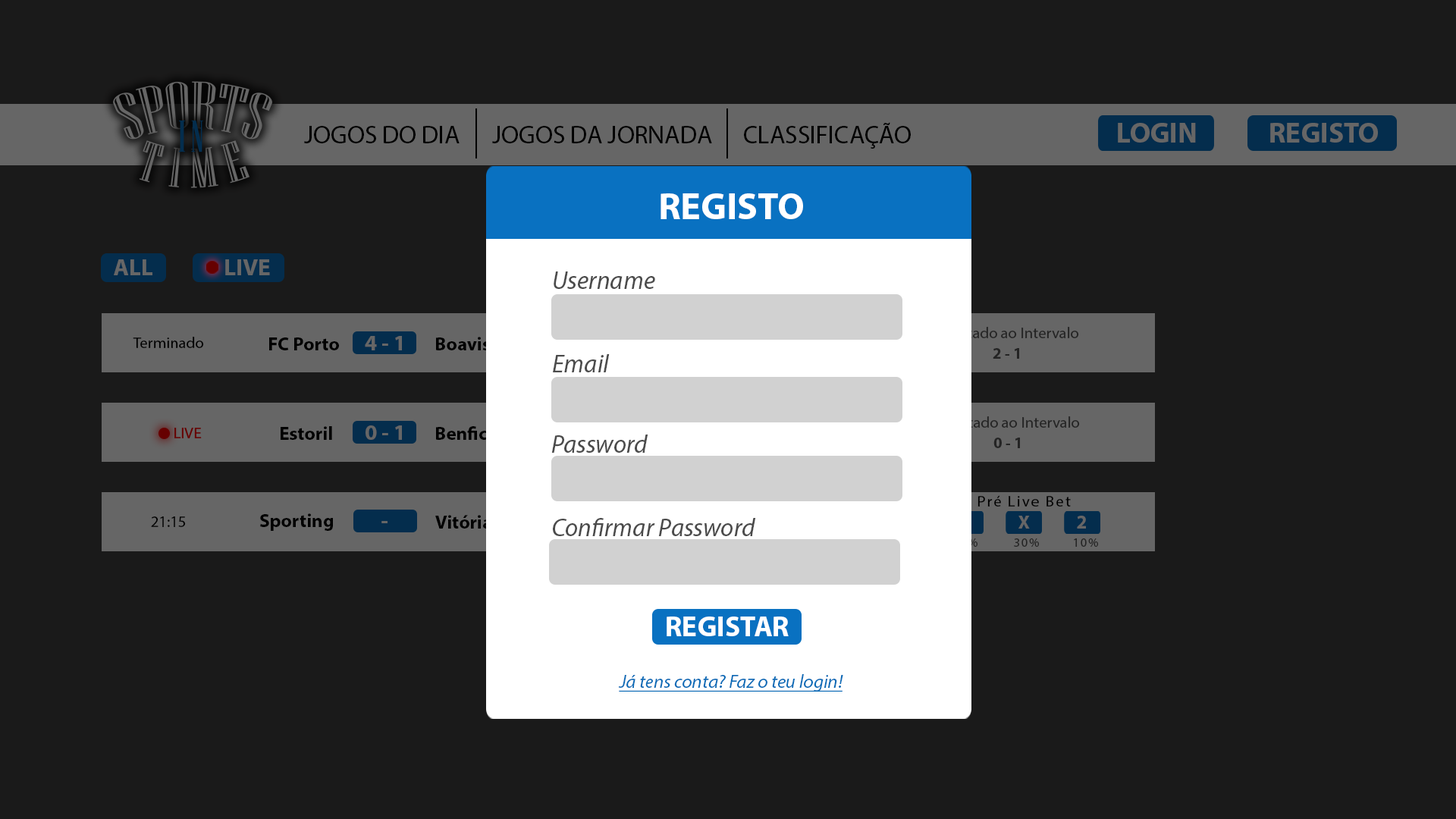
<style>
.page{position:relative;width:1456px;height:819px;background:#1a1a1a}
.page>*{position:absolute;margin:0}
.t1{font:25.3px "MyriadPro-Regular";color:#000000}
.t2{font:28.4px "MyriadPro-Bold";color:#666666}
.t3{font:37.9px "MyriadPro-Bold";color:#ffffff}
.t4{font:25.3px "MyriadPro-It";color:#4b4b4b}
.t5{font:15.8px "MyriadPro-Regular";color:#000000}
.t6{font:19px "MyriadPro-Bold";color:#000000}
.t7{font:22.1px "MyriadPro-Bold";color:#666666}
.t8{font:15.8px "MyriadPro-Bold";color:#242424}
.t9{font:15.8px "MyriadPro-Regular";letter-spacing:0.1em;color:#000000}
.t10{font:19px "MyriadPro-Bold";color:#666666}
.t11{font:12.6px "MyriadPro-Regular";letter-spacing:0.1em;color:#242424}
.t12{font:28.4px "MyriadPro-Bold";color:#ffffff}
.t13{font:19px "MyriadPro-It";color:#0b6cb7;text-decoration:underline}
</style>
<div class="page">
<p class="t1" style="left:304px;top:126px;width:156px;height:17px">JOGOS DO DIA</p>
<p class="t1" style="left:492px;top:126px;width:220px;height:17px">JOGOS DA JORNADA</p>
<p class="t1" style="left:744px;top:122px;width:167px;height:27px">CLASSIFICAÇÃO</p>
<p class="t2" style="left:1118px;top:123px;width:78px;height:20px">LOGIN</p>
<p class="t2" style="left:1270px;top:123px;width:108px;height:20px">REGISTO</p>
<p class="t3" style="left:660px;top:193px;width:143px;height:26px">REGISTO</p>
<p class="t4" style="left:554px;top:271px;width:101px;height:18px">Username</p>
<p class="t5" style="left:133px;top:337px;width:71px;height:11px">Terminado</p>
<p class="t6" style="left:269px;top:337px;width:70px;height:13px">FC Porto</p>
<p class="t7" style="left:365px;top:336px;width:37px;height:14px">4 - 1</p>
<p class="t8" style="left:993px;top:348px;width:26px;height:11px">2 - 1</p>
<p class="t4" style="left:553px;top:354px;width:57px;height:18px">Email</p>
<p class="t7" style="left:366px;top:425px;width:36px;height:15px">0 - 1</p>
<p class="t6" style="left:281px;top:426px;width:51px;height:14px">Estoril</p>
<p class="t6" style="left:436px;top:426px;width:61px;height:14px">Benfica</p>
<p class="t4" style="left:551px;top:435px;width:97px;height:18px">Password</p>
<p class="t8" style="left:993px;top:438px;width:27px;height:10px">0 - 1</p>
<p class="t9" style="left:977px;top:495px;width:94px;height:12px">Pré Live Bet</p>
<p class="t5" style="left:151px;top:516px;width:35px;height:11px">21:15</p>
<p class="t6" style="left:260px;top:513px;width:73px;height:18px">Sporting</p>
<p class="t7" style="left:381px;top:521px;width:7px;height:2px">-</p>
<p class="t4" style="left:553px;top:518px;width:203px;height:18px">Confirmar Password</p>
<p class="t10" style="left:1018px;top:516px;width:12px;height:13px">X</p>
<p class="t10" style="left:1077px;top:516px;width:9px;height:13px">2</p>
<p class="t11" style="left:1014px;top:538px;width:25px;height:9px">30%</p>
<p class="t11" style="left:1074px;top:538px;width:24px;height:9px">10%</p>
<p class="t12" style="left:667px;top:617px;width:122px;height:19px">REGISTAR</p>
<p class="t13" style="left:618px;top:674px;width:225px;height:18px">Já tens conta? Faz o teu login!</p>
</div>
